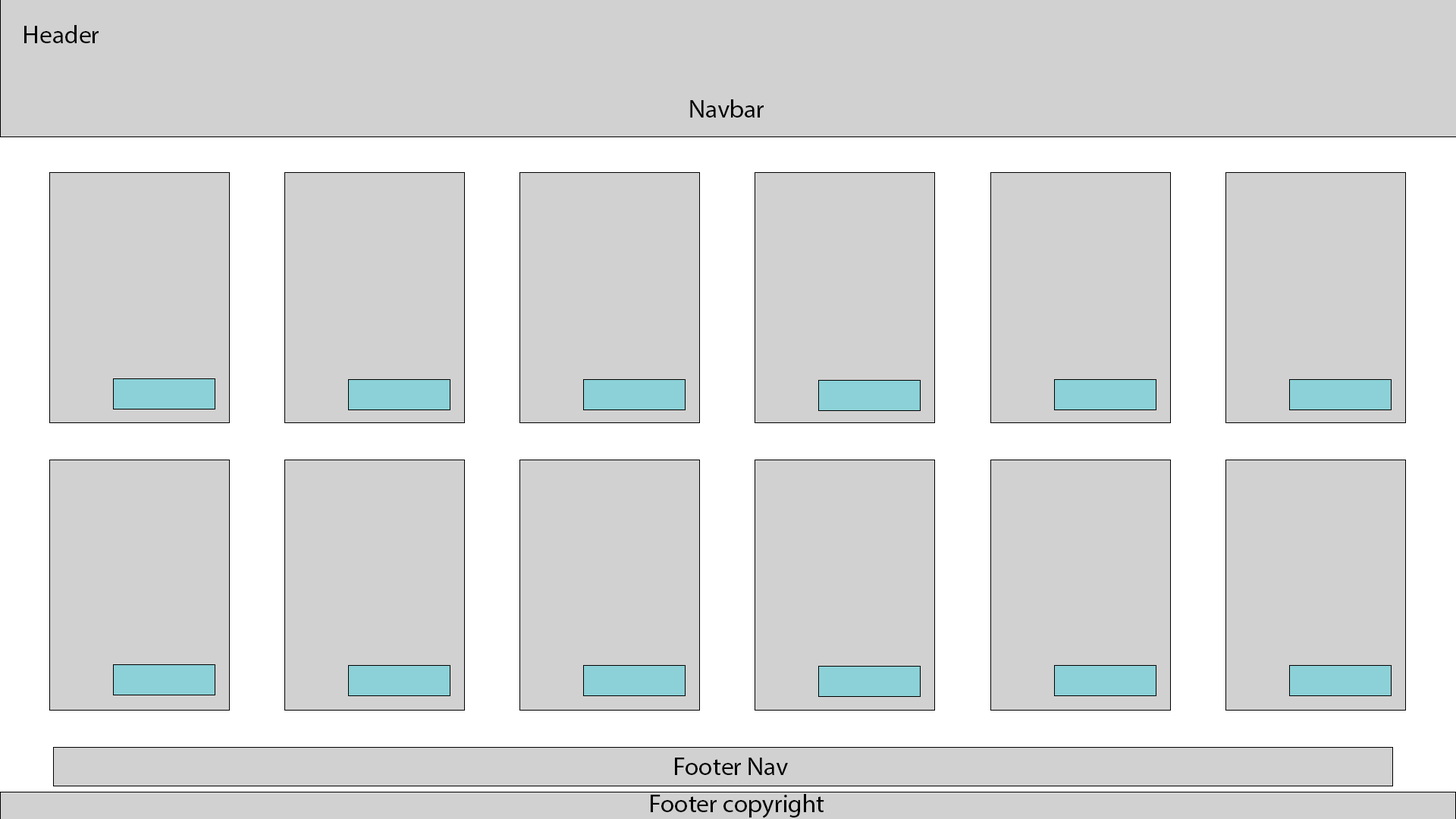
<style>
.page{position:relative;width:1456px;height:819px;background:#d2d1d1}
.page>*{position:absolute;margin:0}
.t1{font:25.3px "MyriadPro-Regular";color:#000000}
</style>
<div class="page">
<p class="t1" style="left:24px;top:25px;width:75px;height:18px">Header</p>
<p class="t1" style="left:690px;top:99px;width:74px;height:19px">Navbar</p>
<p class="t1" style="left:675px;top:758px;width:113px;height:17px">Footer Nav</p>
<p class="t1" style="left:651px;top:794px;width:173px;height:24px">Footer copyright</p>
</div>
